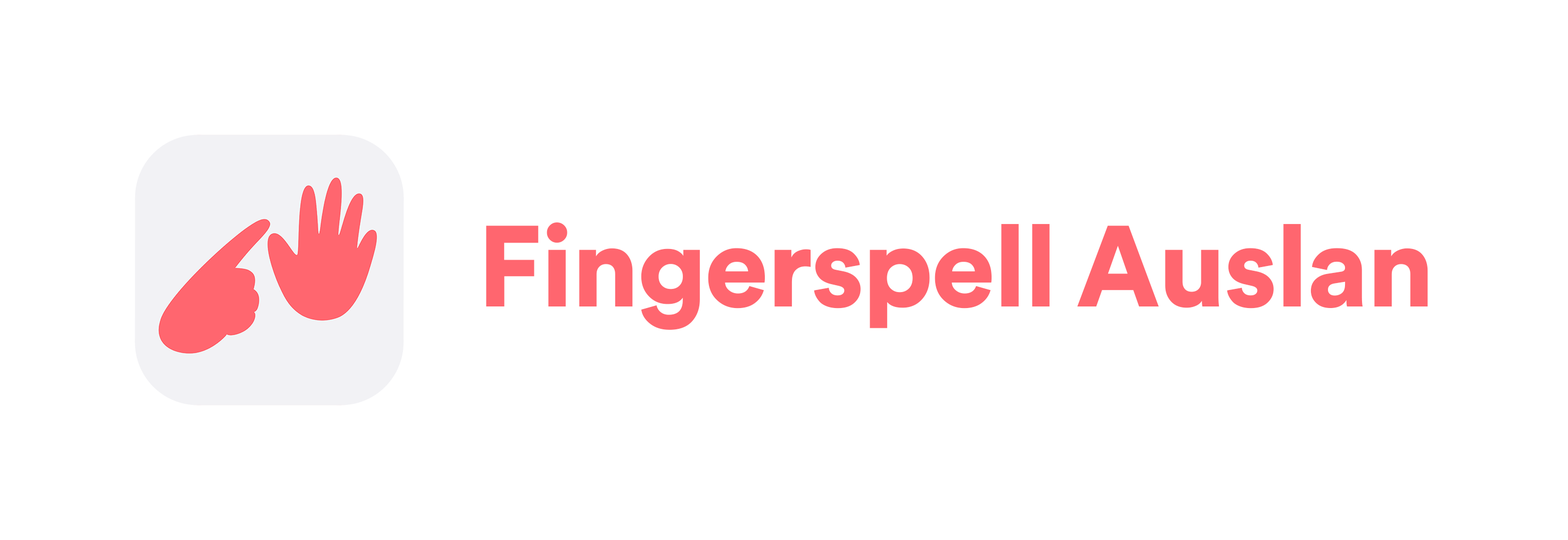
<style>
.page{position:relative;width:1568px;height:540px;background:#ffffff}
.page>*{position:absolute;margin:0}
.t1{font:114.1px "CircularStd-Black";letter-spacing:-0.016em;color:#ff666f}
</style>
<div class="page">
<p class="t1" style="left:486px;top:222px;width:942px;height:108px">Fingerspell Auslan</p>
</div>
